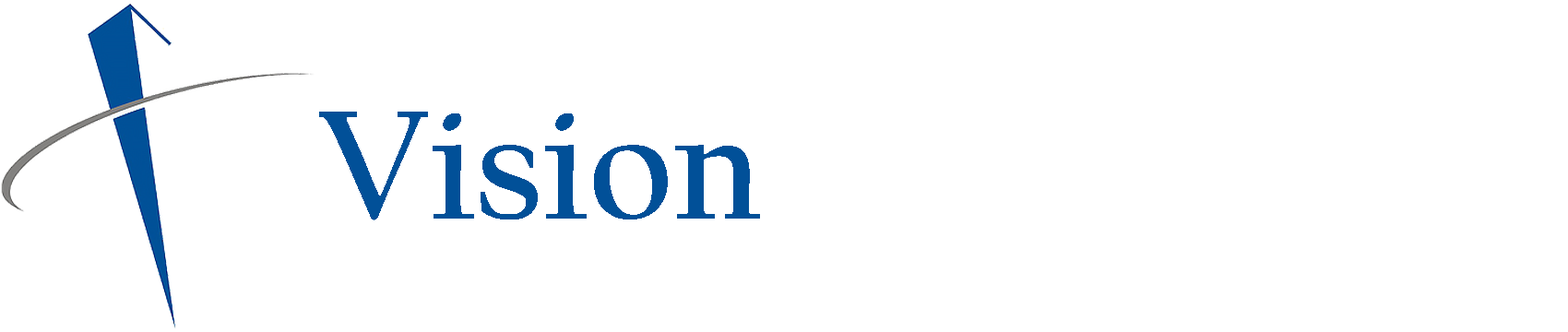
<style>
.page{position:relative;width:1568px;height:332px;background:#ffffff}
.page>*{position:absolute;margin:0}
.t1{font:161.4px "CalifornianFB-Bold";color:#015098}
</style>
<div class="page">
<p class="t1" style="left:319px;top:112px;width:441px;height:108px">Vision</p>
</div>
